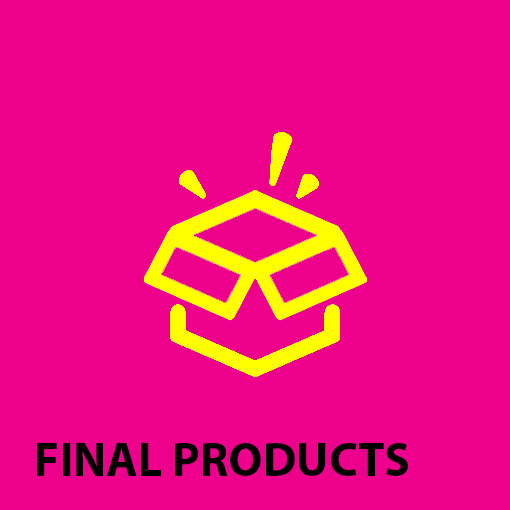
<style>
.page{position:relative;width:510px;height:510px;background:#ed008c}
.page>*{position:absolute;margin:0}
.t1{font:48px "MyriadPro-Bold";color:#000000}
</style>
<div class="page">
<p class="t1" style="left:37px;top:443px;width:371px;height:33px">FINAL PRODUCTS</p>
</div>
